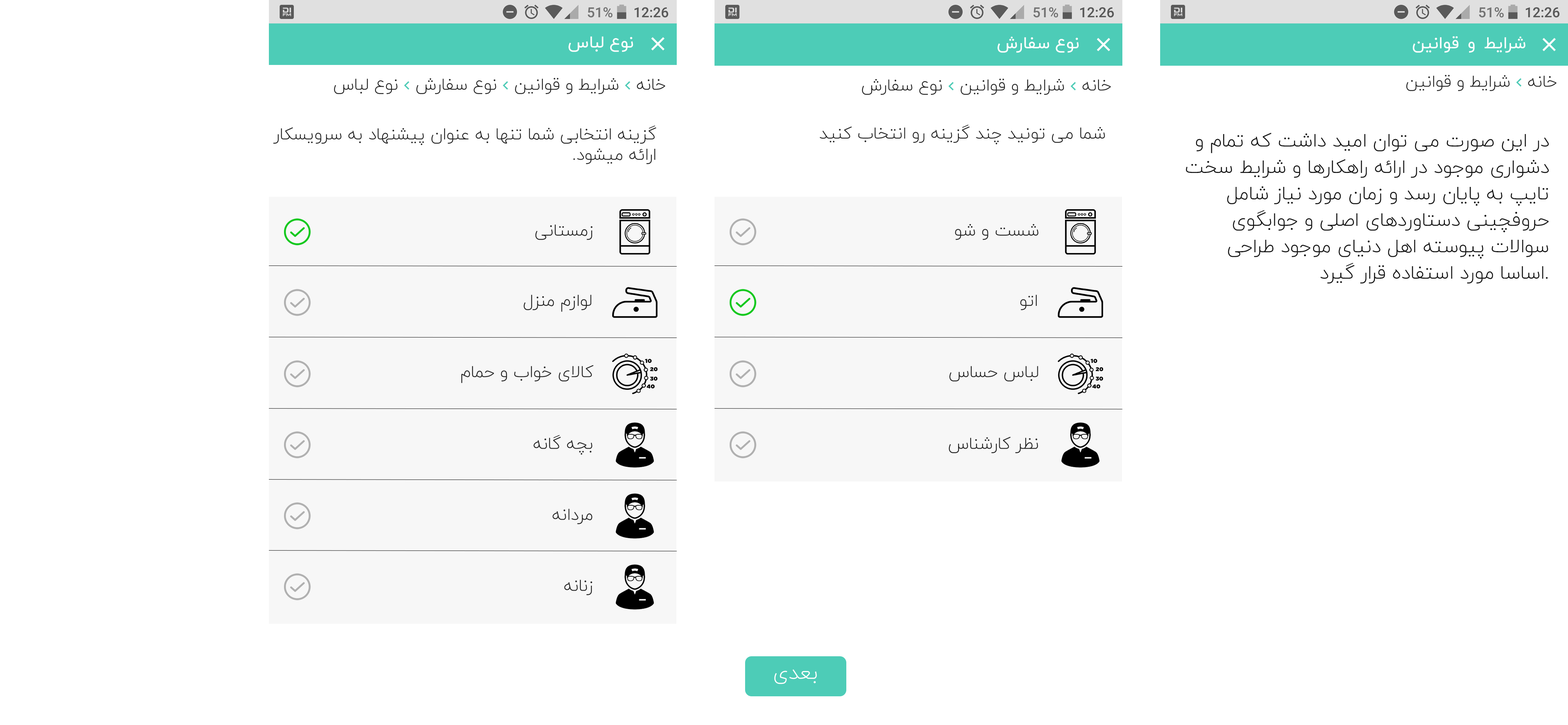
<style>
.page{position:relative;width:1568px;height:725px;background:#ffffff}
.page>*{position:absolute;margin:0}
.t1{font:17px "IRANYekanRD";color:#ffffff}
.t2{font:17px "IRANYekanRD-Light";color:#222222}
.t3{font:19.3px/26.4px "IRANYekanRD-Light";color:#121212}
.t4{font:20.2px "IRANYekanRD-Light";color:#ffffff}
</style>
<div class="page">
<p class="t1" style="left:568px;top:36px;width:65px;height:16px">نوع لباس</p>
<p class="t1" style="left:997px;top:37px;width:82px;height:16px">نوع سفارش</p>
<p class="t1" style="left:1413px;top:36px;width:112px;height:17px">شرایط و قوانین</p>
<p class="t2" style="left:273px;top:125px;width:383px;height:39px;text-align:right">گزینه انتخابی شما تنها به عنوان پیشنهاد به سرویسکار<br>.ارائه میشود</p>
<p class="t2" style="left:819px;top:125px;width:286px;height:20px">شما می تونید چند گزینه رو انتخاب کنید</p>
<p class="t3" style="left:1186px;top:133px;width:363px;height:151px;text-align:right">در این صورت می توان امید داشت که تمام و دشواری موجود در ارائه راهکارها و شرایط سخت تایپ به پایان رسد و زمان مورد نیاز شامل حروفچینی دستاوردهای اصلی و جوابگوی سوالات پیوسته اهل دنیای موجود طراحی اساسا مورد استفاده قرار گیرد.</p>
<p class="t2" style="left:535px;top:224px;width:58px;height:16px">زمستانی</p>
<p class="t2" style="left:955px;top:224px;width:84px;height:16px">شست و شو</p>
<p class="t2" style="left:523px;top:295px;width:68px;height:17px">لوازم منزل</p>
<p class="t2" style="left:1020px;top:295px;width:17px;height:15px">اتو</p>
<p class="t2" style="left:461px;top:365px;width:133px;height:18px">کالای خواب و حمام</p>
<p class="t2" style="left:949px;top:366px;width:89px;height:15px">لباس حساس</p>
<p class="t2" style="left:534px;top:435px;width:59px;height:20px">بچه گانه</p>
<p class="t2" style="left:949px;top:437px;width:89px;height:16px">نظر کارشناس</p>
<p class="t2" style="left:553px;top:509px;width:40px;height:15px">مردانه</p>
<p class="t2" style="left:564px;top:580px;width:28px;height:15px">زنانه</p>
<p class="t4" style="left:774px;top:669px;width:43px;height:15px">بعدی</p>
</div>
